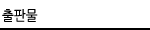
<style>
.page{position:relative;width:150px;height:30px;background:#ffffff}
.page>*{position:absolute;margin:0}
.t1{font:14px "NanumGothic";color:#000000;scale:0.9 1}
</style>
<div class="page">
<p class="t1" style="left:2px;top:9px;width:36px;height:13px">출판물</p>
</div>
